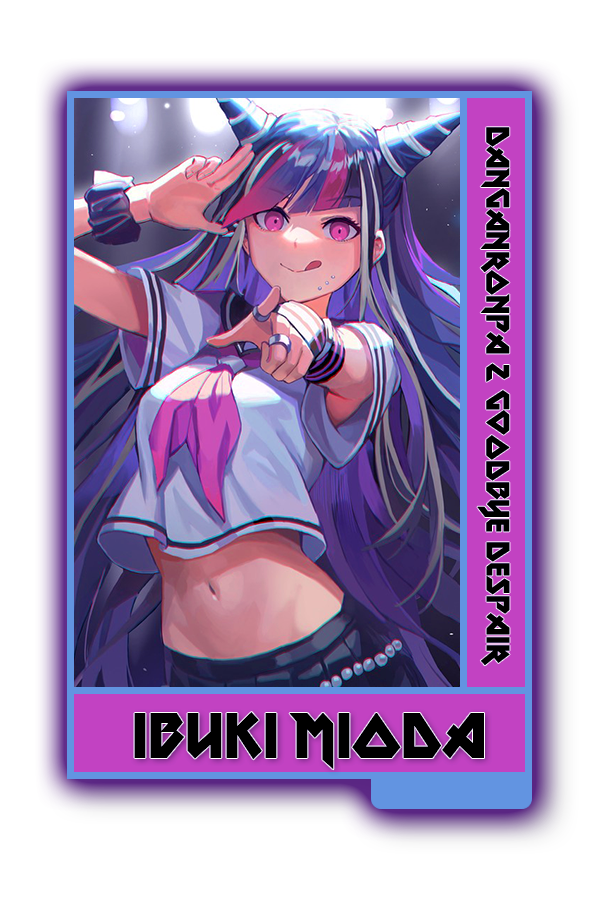
<style>
.page{position:relative;width:600px;height:900px;background:#ffffff}
.page>*{position:absolute;margin:0}
.t1{font:32.2px "MetalLord-Regular";color:#000100}
.t2{font:63.4px "MetalLord-Regular";color:#000100}
</style>
<div class="page">
<p class="t1" style="left:477px;top:127px;width:33px;height:539px;rotate:90deg">DANGANRONPA 2 GOODBYE DESPAIR</p>
<p class="t2" style="left:134px;top:712px;width:350px;height:58px">IBUKI MIODA</p>
</div>
